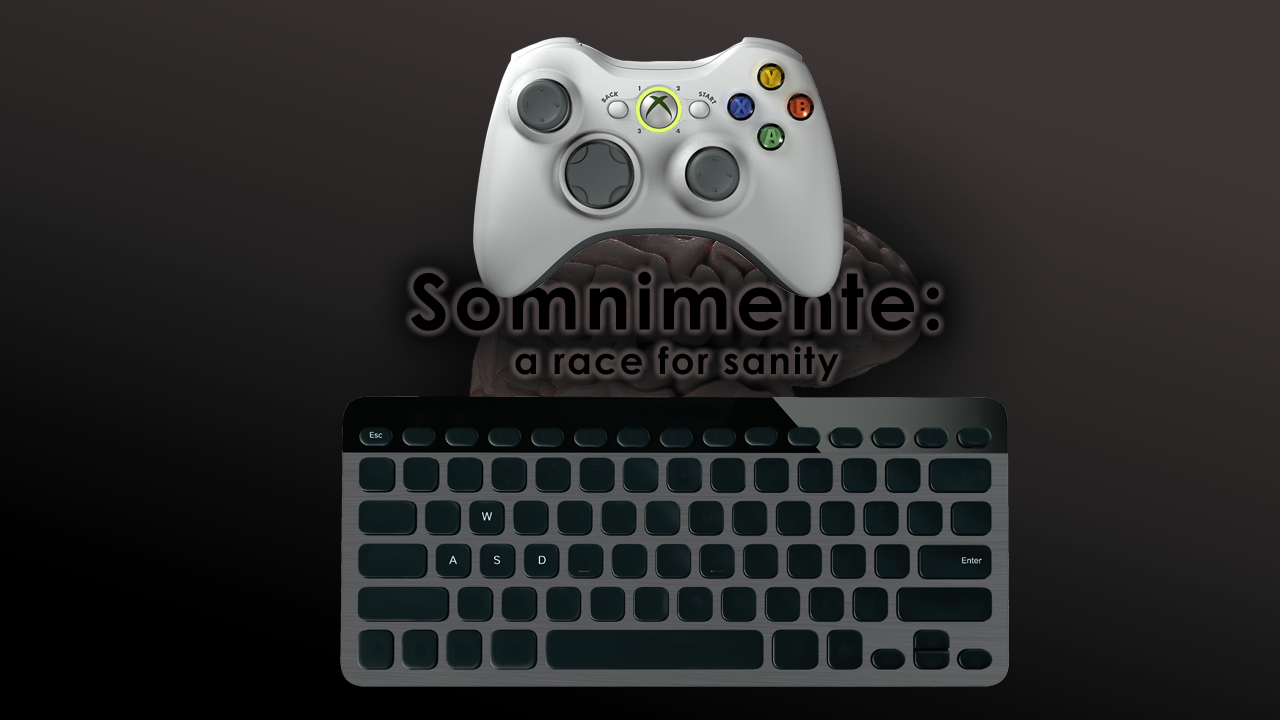
<style>
.page{position:relative;width:1280px;height:720px}
.page>*{position:absolute;margin:0}
.t1{font:37px "CenturyGothic-Bold";letter-spacing:0.06em;color:#000000}
.t2{font:77px "CenturyGothic-Bold";letter-spacing:0.06em;color:#000000}
</style>
<div class="page">
<p class="t1" style="left:411px;top:271px;width:528px;height:111px;text-align:center"><span class="t2">Somnimente:<br></span>a race for sanity</p>
</div>
